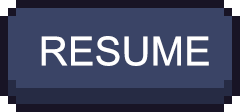
<style>
.page{position:relative;width:240px;height:112px;background:#3a4466}
.page>*{position:absolute;margin:0}
.t1{font:40px "ArialMT";letter-spacing:0.005em;color:#ffffff}
</style>
<div class="page">
<p class="t1" style="left:41px;top:36px;width:168px;height:30px">RESUME</p>
</div>
